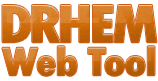
<style>
.page{position:relative;width:158px;height:81px;background:#ffffff}
.page>*{position:absolute;margin:0}
.t1{font:57px "TwCenMT-CondensedExtraBold";letter-spacing:-0.075em;scale:1.15 1}
.t2{font:42px "TwCenMT-CondensedExtraBold";letter-spacing:-0.025em;scale:1.15 1}
</style>
<div class="page">
<p class="t1" style="left:2px;top:5px;width:155px;height:38px">DRHEM</p>
<p class="t2" style="left:2px;top:46px;width:153px;height:30px">Web Tool</p>
</div>
